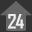
<style>
.page{position:relative;width:32px;height:32px;background:#333333}
.page>*{position:absolute;margin:0}
.t1{font:19px "AgencyFB-Bold";color:#ececec}
</style>
<div class="page">
<p class="t1" style="left:8px;top:14px;width:16px;height:15px">24</p>
</div>
